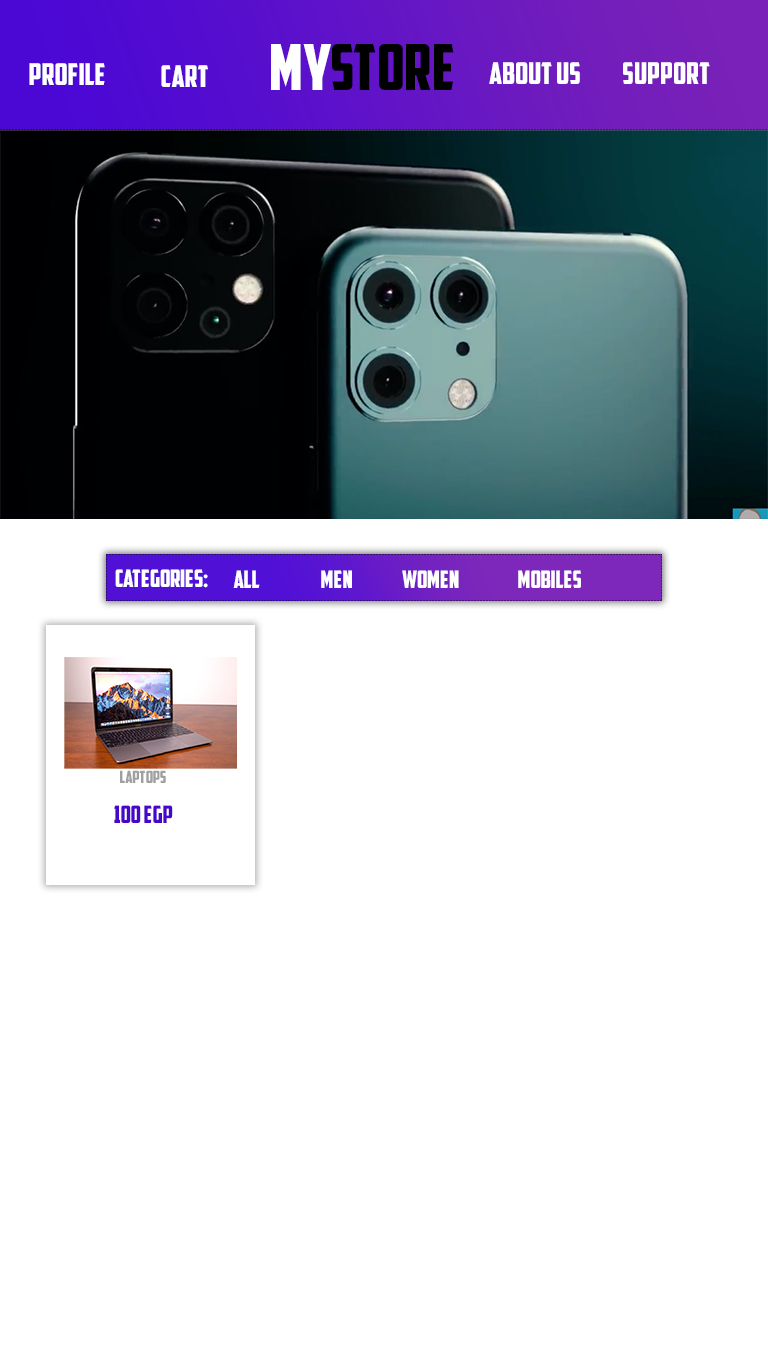
<style>
.page{position:relative;width:768px;height:1366px;background:#ffffff}
.page>*{position:absolute;margin:0}
.t1{font:63.4px "AmericanCaptain";color:#000000}
.t2{font:63.4px "AmericanCaptain";color:#ffffff}
.t3{font:30px "AmericanCaptain";color:#ffffff}
.t4{font:24px "AmericanCaptain";color:#ffffff}
.t5{font:17px "AmericanCaptain";color:#a0a0a0}
.t6{font:24px "AmericanCaptain";color:#4706c9}
</style>
<div class="page">
<p class="t1" style="left:271px;top:44px;width:183px;height:46px"><span class="t2">MY</span>STORE</p>
<p class="t3" style="left:29px;top:63px;width:76px;height:22px">Profile</p>
<p class="t3" style="left:161px;top:65px;width:47px;height:22px">cart</p>
<p class="t3" style="left:489px;top:62px;width:91px;height:22px">About us</p>
<p class="t3" style="left:623px;top:62px;width:87px;height:22px">support</p>
<p class="t4" style="left:115px;top:569px;width:93px;height:19px">Categories:</p>
<p class="t4" style="left:233px;top:570px;width:27px;height:18px">ALL</p>
<p class="t4" style="left:321px;top:570px;width:31px;height:18px">men</p>
<p class="t4" style="left:402px;top:570px;width:57px;height:18px">women</p>
<p class="t4" style="left:518px;top:570px;width:63px;height:18px">mobiles</p>
<p class="t5" style="left:120px;top:770px;width:46px;height:13px">laptops</p>
<p class="t6" style="left:114px;top:805px;width:59px;height:18px">100 egp</p>
</div>
